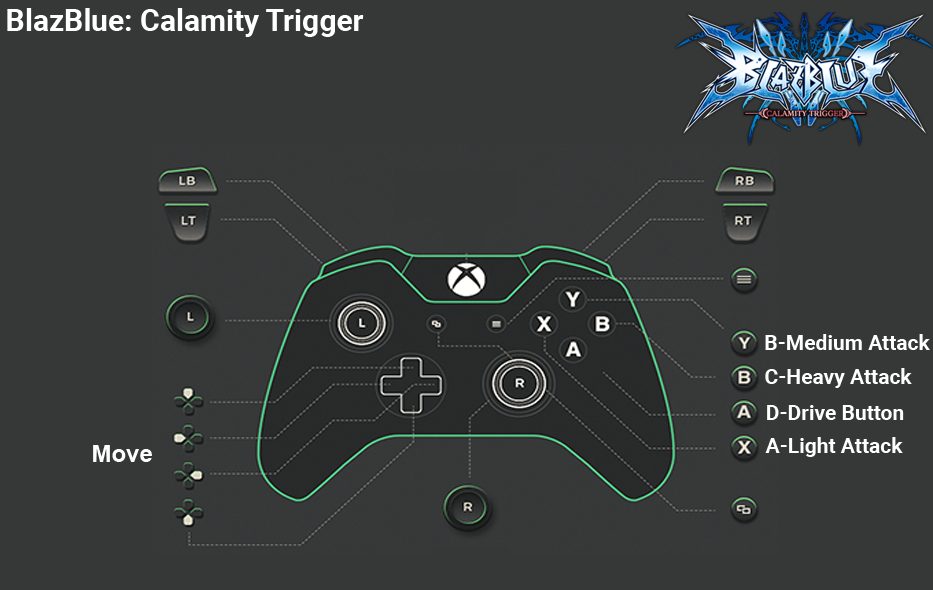
<style>
.page{position:relative;width:933px;height:590px;background:#363838}
.page>*{position:absolute;margin:0}
.t1{font:30px "Roboto-Bold";color:#ffffff}
.t2{font:21px "Roboto-Bold";color:#ffffff}
.t3{font:24px "Arial-BoldMT";color:#fefefe}
</style>
<div class="page">
<p class="t1" style="left:7px;top:8px;width:357px;height:29px">BlazBlue: Calamity Trigger</p>
<p class="t2" style="left:765px;top:334px;width:165px;height:16px">B-Medium Attack</p>
<p class="t2" style="left:765px;top:368px;width:147px;height:20px">C-Heavy Attack</p>
<p class="t2" style="left:767px;top:405px;width:137px;height:15px">D-Drive Button</p>
<p class="t2" style="left:765px;top:437px;width:138px;height:20px">A-Light Attack</p>
<p class="t3" style="left:93px;top:445px;width:59px;height:17px">Move</p>
</div>
